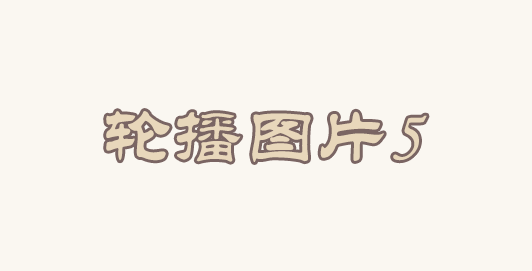
<style>
.page{position:relative;width:532px;height:271px;background:#faf7f1}
.page>*{position:absolute;margin:0}
.t1{font:72px "STLiti";color:#e8d7bb}
</style>
<div class="page">
<p class="t1" style="left:106px;top:111px;width:321px;height:51px">轮播图片5</p>
</div>
